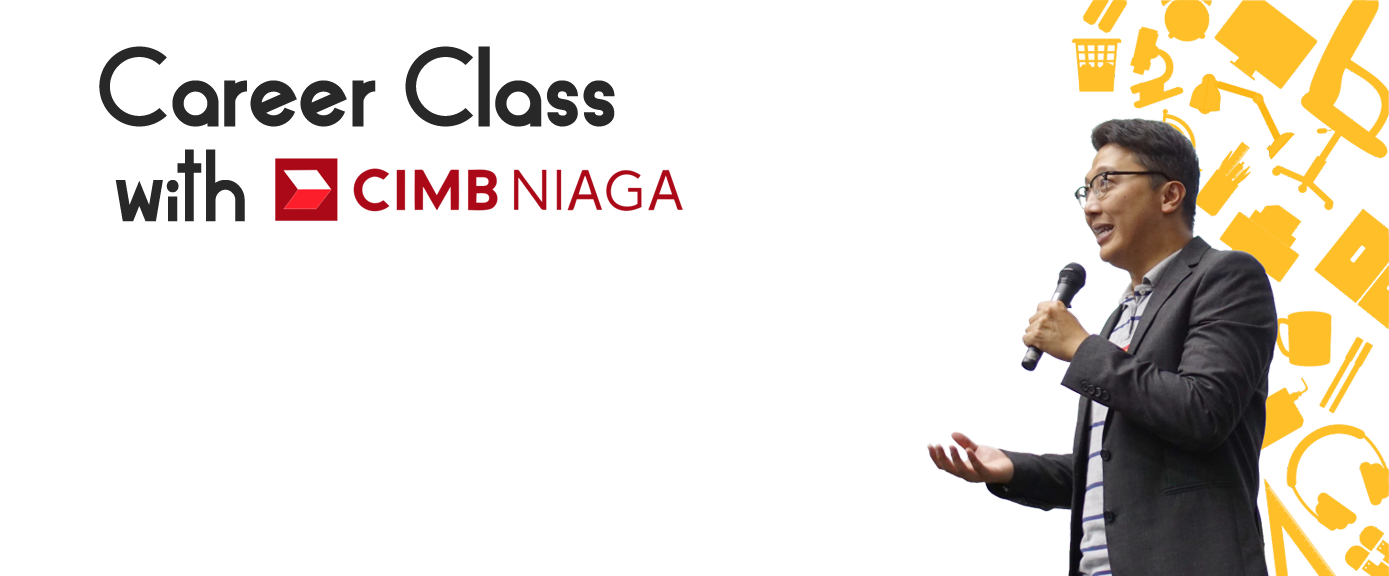
<style>
.page{position:relative;width:1389px;height:576px;background:#ffffff}
.page>*{position:absolute;margin:0}
.t1{font:99.9px "AlpacaScarlettDemo";color:#282828}
.t2{font:89.5px "AlpacaScarlettDemo";color:#282828;scale:0.94 1}
</style>
<div class="page">
<p class="t1" style="left:99px;top:46px;width:516px;height:81px">Career Class</p>
<p class="t2" style="left:115px;top:149px;width:130px;height:73px">with</p>
</div>
